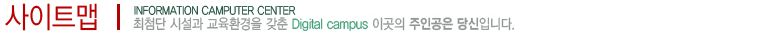
<style>
.page{position:relative;width:780px;height:37px;background:#ffffff}
.page>*{position:absolute;margin:0}
.t1{font:30px "YDIYGO320";color:#b80101;scale:0.85 1}
.t2{font:12px "YDIYGO320";color:#1d503a;scale:0.85 1}
.t3{font:14px "YDIYGO320";color:#929697;scale:0.85 1}
.t4{font:14px "YDIYGO320";color:#3fa076;scale:0.85 1}
.t5{font:14px "YDIYGO350";color:#929697;scale:0.85 1}
</style>
<div class="page">
<p class="t1" style="left:5px;top:3px;width:92px;height:28px">사이트맵</p>
<p class="t2" style="left:134px;top:5px;width:162px;height:10px">INFORMATION CAMPUTER CENTER</p>
<p class="t3" style="left:133px;top:17px;width:381px;height:14px">최첨단 시설과 교육환경을 갖춘 <span class="t4">Digital campus</span> 이곳의 <span class="t5">주인공은 당신</span>입니다.</p>
</div>
